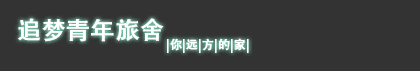
<style>
.page{position:relative;width:420px;height:71px;background:#333333}
.page>*{position:absolute;margin:0}
.t1{font:24px "AdobeHeitiStd-Regular";color:#ffffff;font-weight:bold}
.t2{font:12px "AdobeHeitiStd-Regular";color:#ffffff;font-weight:bold}
</style>
<div class="page">
<p class="t1" style="left:18px;top:18px;width:146px;height:24px">追梦青年旅舍</p>
<p class="t2" style="left:167px;top:38px;width:82px;height:15px">|你|远|方|的|家|</p>
</div>
